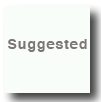
<style>
.page{position:relative;width:101px;height:102px;background:#f8fdfa}
.page>*{position:absolute;margin:0}
.t1{font:14px "Helvetica-Bold";letter-spacing:0.075em;color:#7d7676}
</style>
<div class="page">
<p class="t1" style="left:8px;top:39px;width:79px;height:13px">Suggested</p>
</div>
